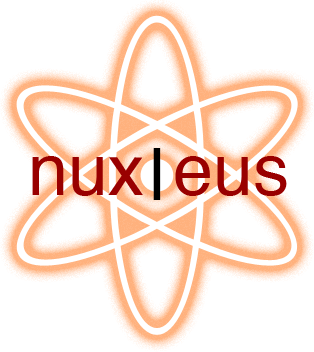
<style>
.page{position:relative;width:314px;height:352px;background:#ffffff}
.page>*{position:absolute;margin:0}
.t1{font:72px "Helvetica";color:#990000}
.t2{font:72px "Helvetica";letter-spacing:0.075em;color:#990000}
.t3{font:72px "Helvetica";letter-spacing:0.1em;color:#000000}
</style>
<div class="page">
<p class="t1" style="left:32px;top:148px;width:255px;height:52px">nu<span class="t2">x</span><span class="t3">l</span>eus</p>
</div>
